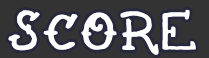
<style>
.page{position:relative;width:209px;height:58px;background:#333333}
.page>*{position:absolute;margin:0}
.t1{font:48px "Rats-Get-Fat";color:#ffffff}
</style>
<div class="page">
<p class="t1" style="left:8px;top:9px;width:188px;height:46px">SCORE</p>
</div>
